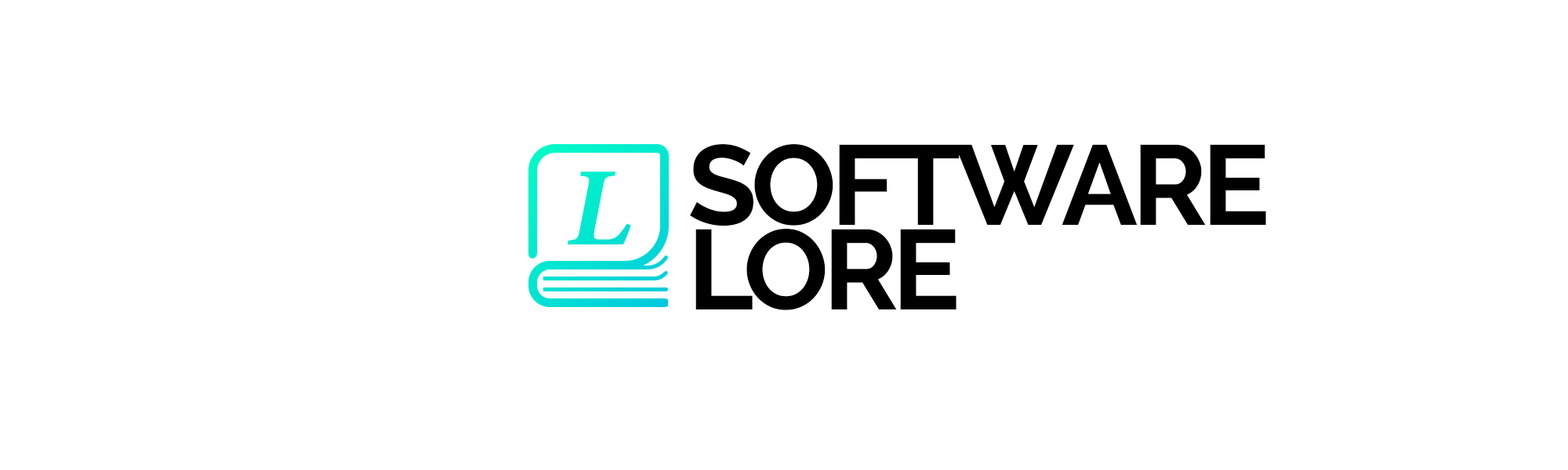
<style>
.page{position:relative;width:1568px;height:470px;background:#ffffff}
.page>*{position:absolute;margin:0}
.t1{font:113.2px/84.9px "Raleway-Bold";letter-spacing:-0.05em;color:#000000;text-transform:uppercase}
.t2{font:111.9px "MinionConceptItalic-BoldItalic";letter-spacing:-0.05em;color:#00e9d0;text-transform:uppercase}
</style>
<div class="page">
<p class="t1" style="left:690px;top:144px;width:576px;height:166px">Software<br>lore</p>
<p class="t2" style="left:568px;top:172px;width:63px;height:73px">L</p>
</div>
